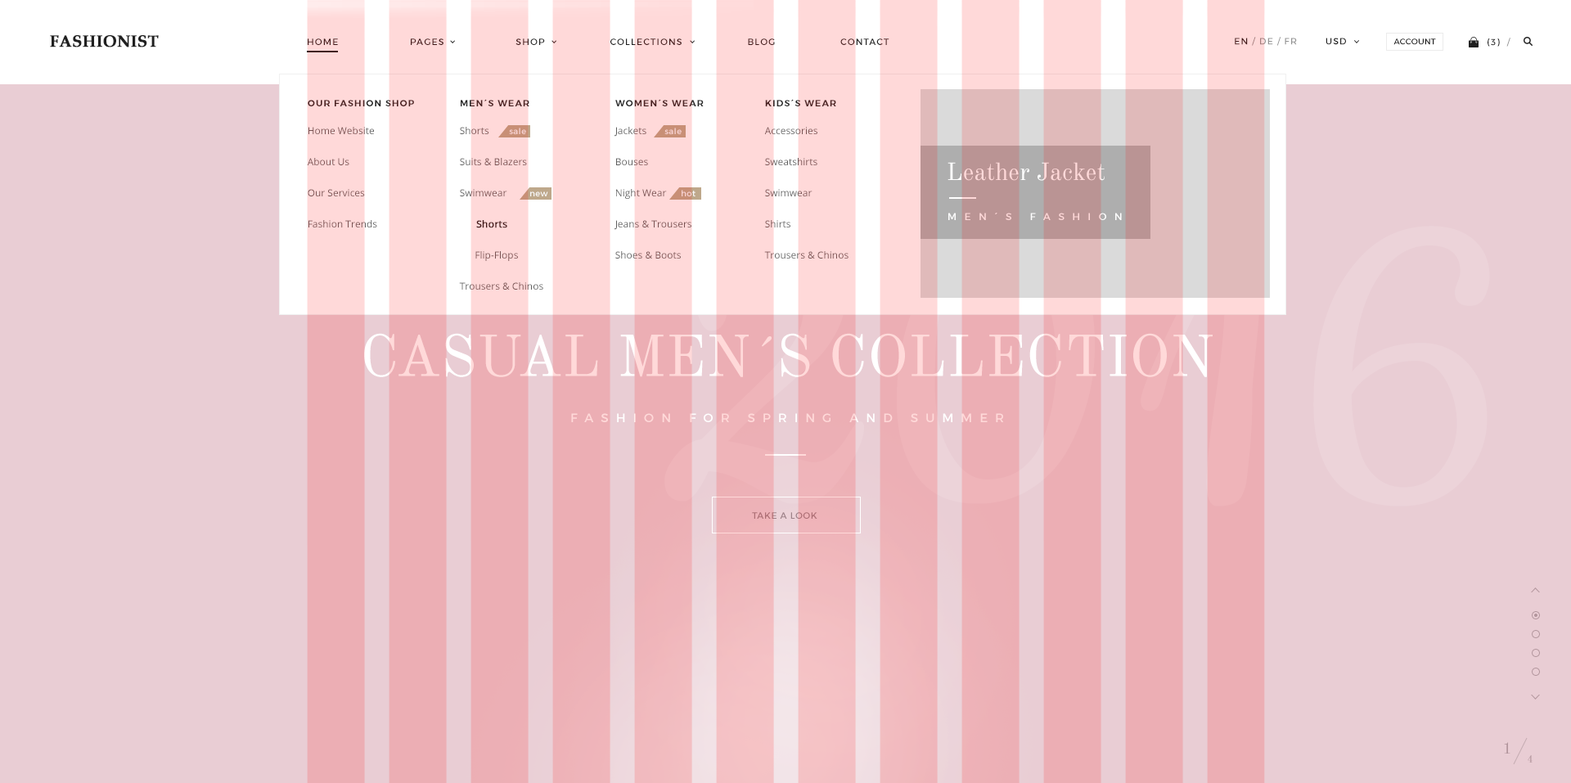
<style>
.page{position:relative;width:1571px;height:783px;background:#e9cdd4}
.page>*{position:absolute;margin:0}
.t1{font:16.4px "BookAntiqua-Bold";color:#202020;text-transform:uppercase;font-weight:bold}
.t2{font:9px "Montserrat-Regular";letter-spacing:0.1em}
.t3{font:9px "Montserrat-Regular";letter-spacing:0.1em;color:#939393}
.t4{font:9px "Montserrat-Regular";letter-spacing:0.1em;color:#202020}
.t5{font:8.2px "Montserrat-Regular";letter-spacing:0.01em;color:#202020}
.t6{font:9px "Montserrat-SemiBold";letter-spacing:0.1em;color:#492323;text-transform:uppercase}
.t7{font:9px "Montserrat-SemiBold";letter-spacing:0.1em;text-transform:uppercase}
.t8{font:9.8px/31.1px "OpenSans";color:#5f5f5f}
.t9{font:9.8px/31.1px "OpenSans"}
.t10{font:9.8px/31.1px "OpenSans";font-weight:bold}
.t11{font:8.2px "Montserrat-Regular";letter-spacing:0.05em;color:#f9d3d3}
.t12{font:24.5px "OldStandardTT-Regular";color:#ffd9d9}
.t13{font:8.2px "Montserrat-Regular";letter-spacing:0.05em;color:#f8f8f8}
.t14{font:9.8px "Montserrat-Regular";letter-spacing:0.8em;text-transform:uppercase}
.t15{font:58.1px "OldStandardTT-Regular"}
.t16{font:12.3px "Montserrat-Regular";letter-spacing:0.6em}
.t17{font:9px "Montserrat-Regular";letter-spacing:0.05em;color:#9d8188}
.t18{font:16.4px "OldStandardTT-Regular";letter-spacing:0.05em;color:#b2959c}
.t19{font:10.6px "OldStandardTT-Regular";letter-spacing:0.05em;color:#b2959c}
</style>
<div class="page">
<p class="t1" style="left:50px;top:35px;width:109px;height:12px">Fashionist</p>
<p class="t2" style="left:308px;top:38px;width:581px;height:7px">HOME                      PAGES                      SHOP                    COLLECTIONS                    BLOG                    CONTACT</p>
<p class="t3" style="left:1235px;top:37px;width:62px;height:9px"><span class="t4">EN </span>/ DE / FR</p>
<p class="t4" style="left:1325px;top:38px;width:21px;height:7px">USD</p>
<p class="t5" style="left:1393px;top:38px;width:43px;height:7px">ACCOUNT</p>
<p class="t4" style="left:1487px;top:38px;width:23px;height:9px">(3)  /</p>
<p class="t6" style="left:308px;top:100px;width:106px;height:6px">our fashion shop</p>
<p class="t6" style="left:461px;top:99px;width:68px;height:7px">men´s wear</p>
<p class="t7" style="left:615px;top:99px;width:89px;height:7px">women´s wear</p>
<p class="t6" style="left:765px;top:99px;width:71px;height:7px">KIDS´s wear</p>
<p class="t8" style="left:307px;top:127px;width:70px;height:100px">Home Website<br>About Us<br>Our Services<br>Fashion Trends</p>
<p class="t9" style="left:459px;top:127px;width:84px;height:163px">Shorts<br>Suits &amp; Blazers<br>Swimwear<br> <span class="t10">     Shorts<br></span>      Flip-Flops<br>Trousers &amp; Chinos</p>
<p class="t11" style="left:509px;top:128px;width:17px;height:6px">sale</p>
<p class="t8" style="left:614px;top:127px;width:77px;height:132px">Jackets<br>Bouses<br>Night Wear<br>Jeans &amp; Trousers<br>Shoes &amp; Boots</p>
<p class="t11" style="left:664px;top:128px;width:18px;height:6px">sale</p>
<p class="t8" style="left:764px;top:127px;width:84px;height:132px">Accessories<br>Sweatshirts<br>Swimwear<br>Shirts<br>Trousers &amp; Chinos</p>
<p class="t12" style="left:947px;top:162px;width:158px;height:19px">Leather Jacket</p>
<p class="t13" style="left:530px;top:191px;width:18px;height:5px">new</p>
<p class="t11" style="left:682px;top:190px;width:13px;height:6px">hot</p>
<p class="t14" style="left:948px;top:213px;width:174px;height:7px">MEN´S FASHION</p>
<p class="t15" style="left:364px;top:333px;width:849px;height:44px">CASUAL MEN´S COLLECTION</p>
<p class="t16" style="left:571px;top:413px;width:433px;height:9px">FASHION FOR SPRING AND SUMMER</p>
<p class="t17" style="left:752px;top:512px;width:65px;height:7px">TAKE A LOOK</p>
<p class="t18" style="left:1504px;top:742px;width:6px;height:12px">1</p>
<p class="t19" style="left:1528px;top:755px;width:4px;height:8px">4</p>
</div>
